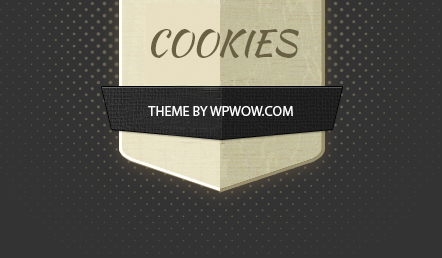
<style>
.page{position:relative;width:442px;height:258px;background:#333333}
.page>*{position:absolute;margin:0}
.t1{font:35px "KaushanScript-Regular";color:#696044;text-transform:uppercase}
.t2{font:14px "MyriadPro-Regular";color:#ffffff;text-transform:uppercase}
</style>
<div class="page">
<p class="t1" style="left:151px;top:29px;width:148px;height:29px">cookies</p>
<p class="t2" style="left:148px;top:106px;width:145px;height:10px">theme by wpwow.com</p>
</div>
